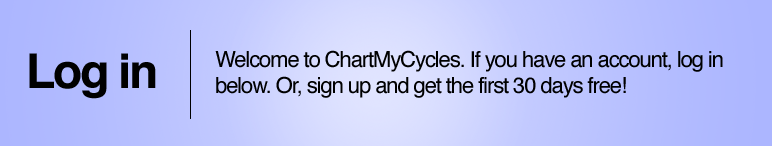
<style>
.page{position:relative;width:772px;height:146px}
.page>*{position:absolute;margin:0}
.t1{font:48px "Helvetica-Bold";letter-spacing:-0.05em;color:#000000}
.t2{font:22px "Helvetica";letter-spacing:-0.05em;color:#000000}
</style>
<div class="page">
<p class="t1" style="left:29px;top:53px;width:127px;height:46px">Log in</p>
<p class="t2" style="left:215px;top:50px;width:508px;height:48px">Welcome to ChartMyCycles. If you have an account, log in<br>below. Or, sign up and get the first 30 days free!</p>
</div>
